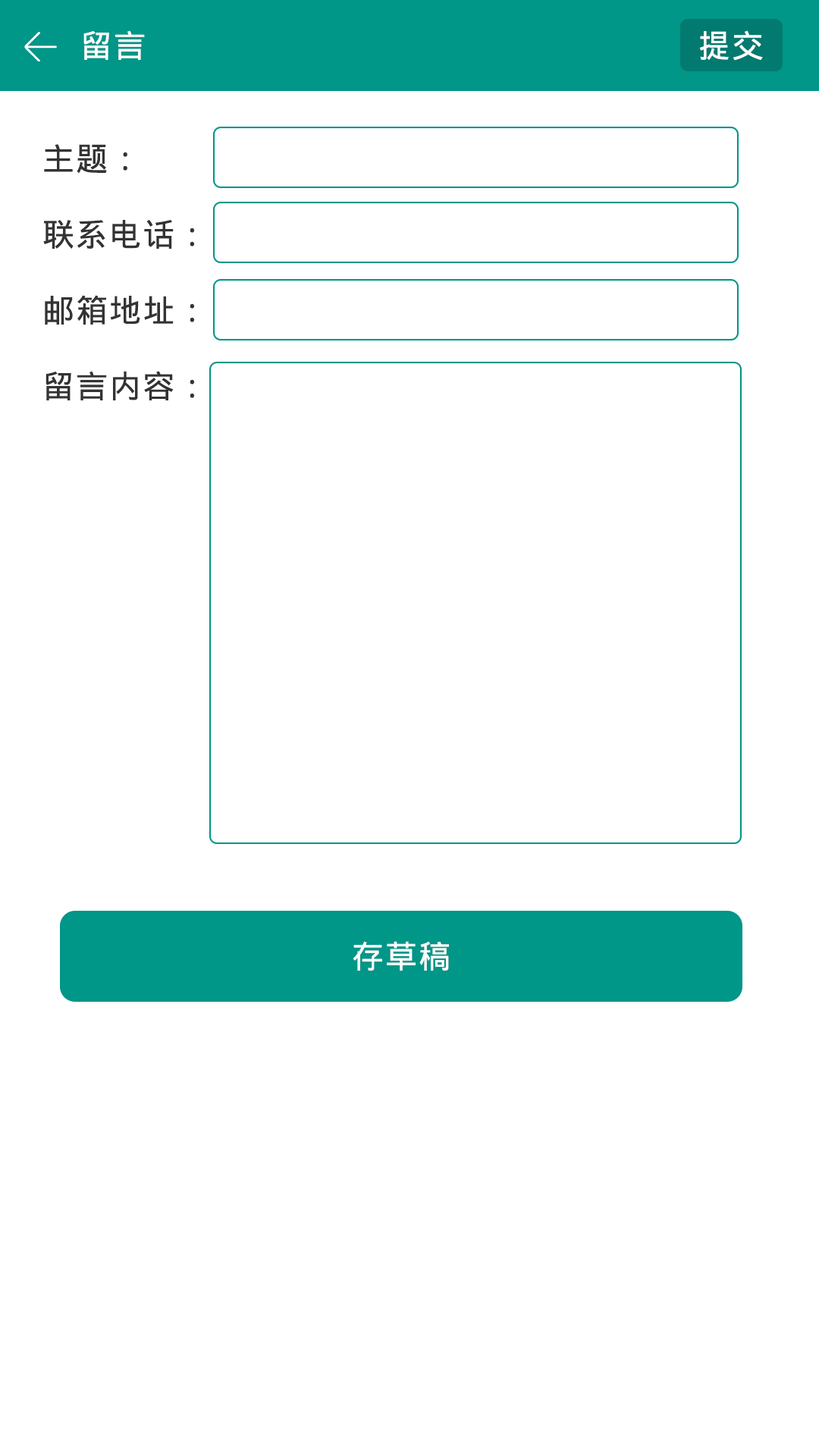
<style>
.page{position:relative;width:819px;height:1456px;background:#ffffff}
.page>*{position:absolute;margin:0}
.t1{font:31.8px "DroidSansFallback";letter-spacing:0.05em;color:#ffffff}
.t2{font:31.8px/75.8px "DroidSansFallback";letter-spacing:0.05em;color:#333333}
</style>
<div class="page">
<p class="t1" style="left:83px;top:30px;width:62px;height:30px">留言</p>
<p class="t1" style="left:699px;top:30px;width:64px;height:31px">提交</p>
<p class="t2" style="left:43px;top:144px;width:152px;height:256px">主题：         <br>联系电话：  <br>邮箱地址：  <br>留言内容：</p>
<p class="t1" style="left:353px;top:941px;width:96px;height:30px">存草稿</p>
</div>
